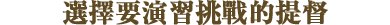
<style>
.page{position:relative;width:390px;height:25px;background:#ffffff}
.page>*{position:absolute;margin:0}
.t1{font:26px "RyuminPr6N-ExBold";color:#5f4a23;font-weight:bold}
</style>
<div class="page">
<p class="t1" style="left:62px;top:0px;width:266px;height:25px">選擇要演習挑戰的提督</p>
</div>
